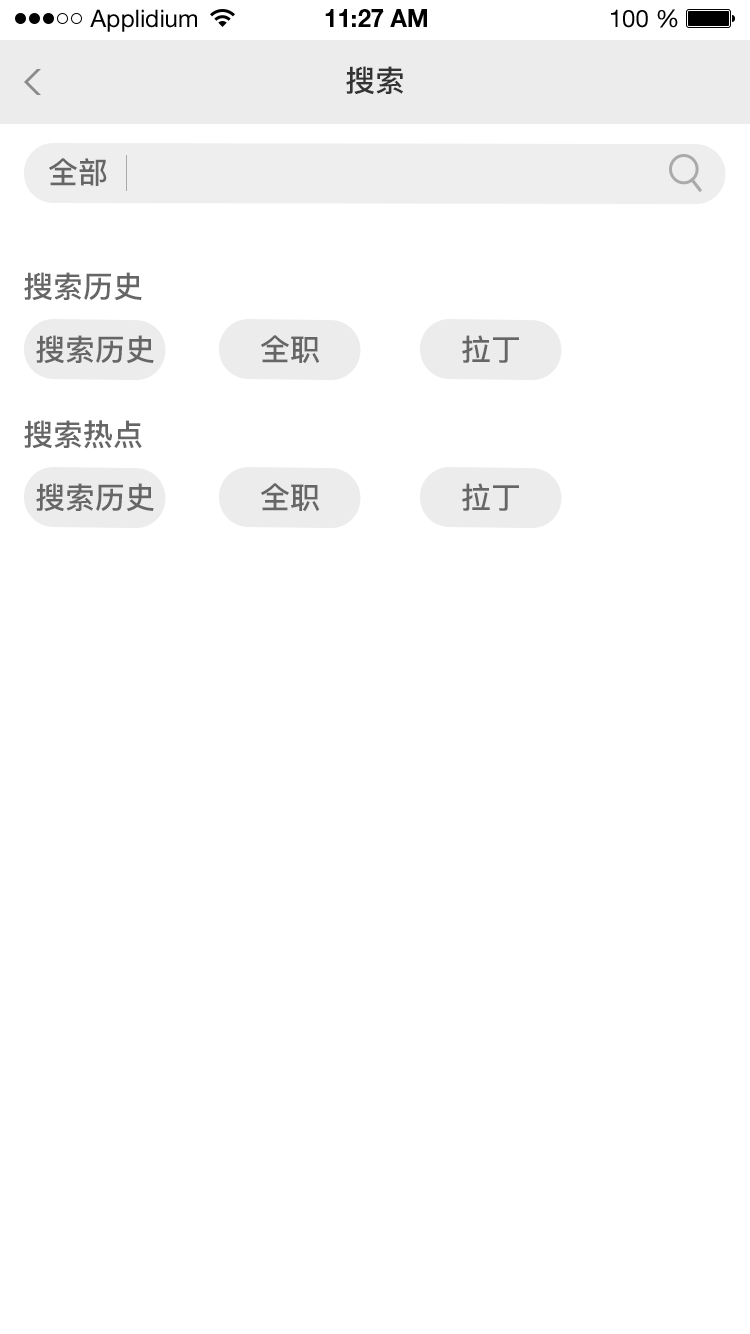
<style>
.page{position:relative;width:750px;height:1334px;background:#ffffff}
.page>*{position:absolute;margin:0}
.t1{font:24px "HelveticaNeueLTStd-Roman";color:#000000}
.t2{font:24px "HelveticaNeueLTStd-Bd";color:#000000}
.t3{font:30px "PingFang-SC-Bold";color:#333333}
.t4{font:30px "PingFang-SC-Bold";color:#666666}
</style>
<div class="page">
<p class="t1" style="left:90px;top:9px;width:107px;height:23px">Applidium</p>
<p class="t2" style="left:325px;top:9px;width:102px;height:18px">11:27 AM</p>
<p class="t1" style="left:611px;top:9px;width:67px;height:19px">100 %</p>
<p class="t3" style="left:346px;top:66px;width:57px;height:29px">搜索</p>
<p class="t4" style="left:49px;top:158px;width:58px;height:28px">全部</p>
<p class="t4" style="left:24px;top:272px;width:118px;height:29px">搜索历史</p>
<p class="t4" style="left:36px;top:335px;width:118px;height:29px">搜索历史</p>
<p class="t4" style="left:261px;top:335px;width:59px;height:29px">全职</p>
<p class="t4" style="left:462px;top:335px;width:57px;height:28px">拉丁</p>
<p class="t4" style="left:24px;top:420px;width:118px;height:29px">搜索热点</p>
<p class="t4" style="left:36px;top:483px;width:118px;height:29px">搜索历史</p>
<p class="t4" style="left:261px;top:483px;width:59px;height:29px">全职</p>
<p class="t4" style="left:462px;top:483px;width:57px;height:28px">拉丁</p>
</div>
